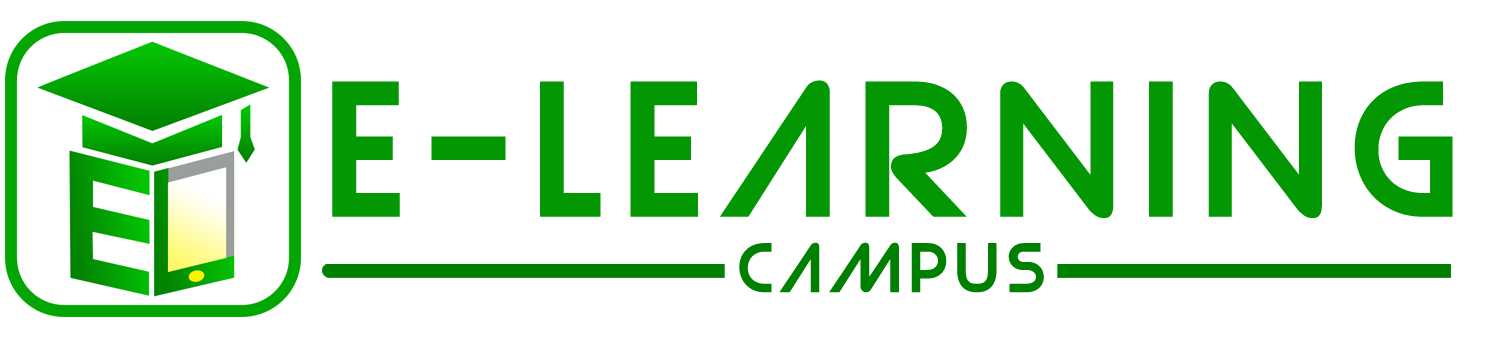
<style>
.page{position:relative;width:1486px;height:345px;background:#ffffff}
.page>*{position:absolute;margin:0}
.t1{font:173px "Strasua-Regular";letter-spacing:0.12em;color:#039703}
.t2{font:86.9px "Strasua-Regular";letter-spacing:0.12em;color:#039703}
.t3{font:63px "Strasua-Regular";letter-spacing:0.12em;color:#008000}
.t4{font:86.9px "Strasua-Regular";letter-spacing:0.12em;color:#008000}
</style>
<div class="page">
<p class="t1" style="left:332px;top:80px;width:1121px;height:139px"><span class="t2"> </span>E-learning</p>
<p class="t3" style="left:739px;top:242px;width:305px;height:51px"><span class="t4"> <br></span>Campus</p>
</div>
